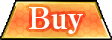
<style>
.page{position:relative;width:112px;height:40px}
.page>*{position:absolute;margin:0}
.t1{font:30px "RyuminPro-ExBold";color:#fffffa}
</style>
<div class="page">
<p class="t1" style="left:29px;top:7px;width:54px;height:27px">Buy</p>
</div>
